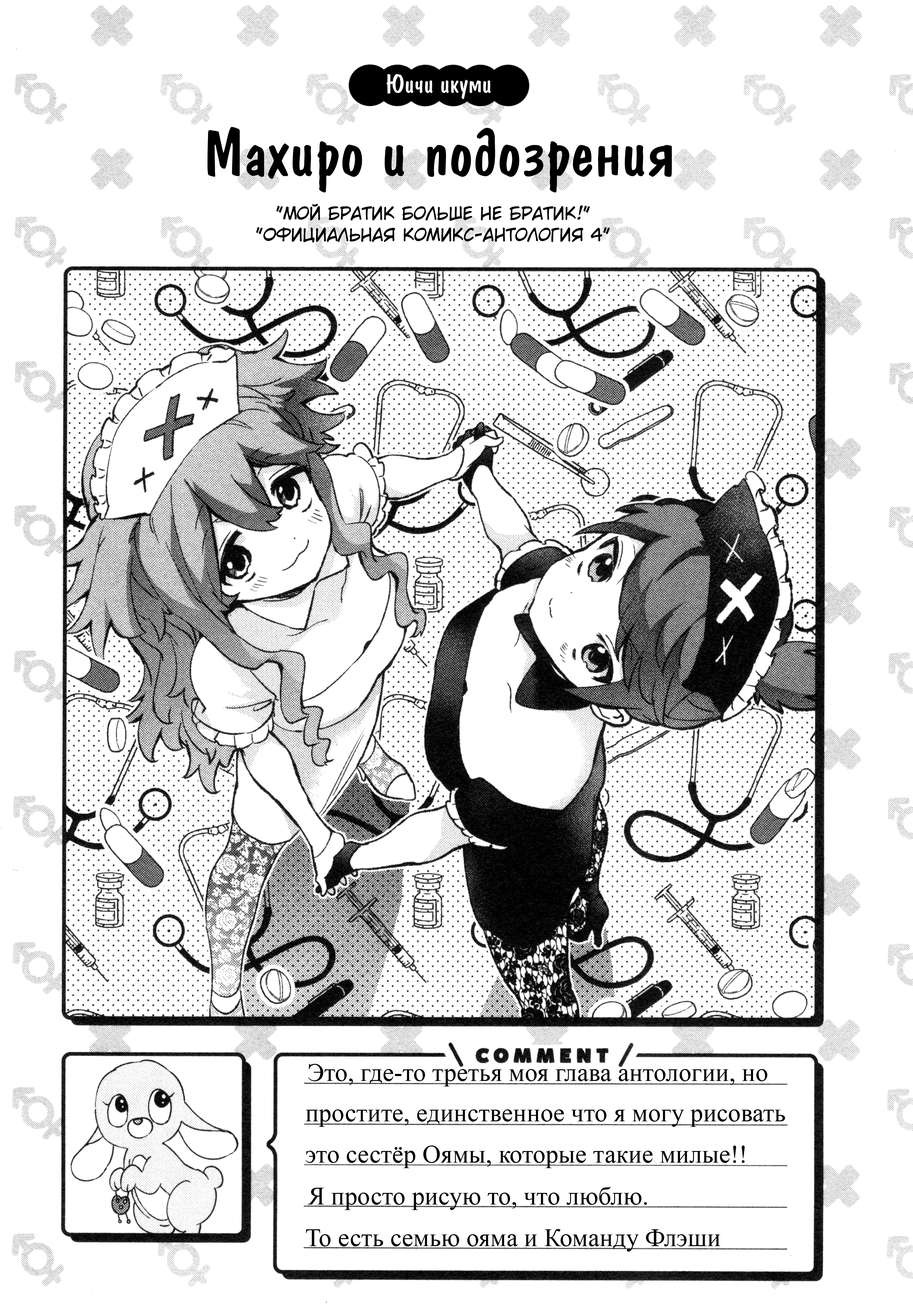
<style>
.page{position:relative;width:913px;height:1307px;background:#ffffff}
.page>*{position:absolute;margin:0}
.t1{font:25.5px "ADomIno";letter-spacing:0.006em;color:#ffffff}
.t2{font:66.2px "ADomIno";letter-spacing:0.006em;color:#000000}
.t3{font:17.1px/21.4px "v_CCWild-Words-Roman";color:#000000}
.t4{font:25.5px "TimesNewRomanPSMT";color:#000000}
</style>
<div class="page">
<p class="t1" style="left:386px;top:74px;width:105px;height:25px">Юичи икуми</p>
<p class="t2" style="left:207px;top:127px;width:465px;height:65px">Махиро и подозрения</p>
<p class="t3" style="left:256px;top:204px;width:354px;height:38px;text-align:center">"Мой братик больше не братик!"<br>"Официальная комикс-антология 4"</p>
<p class="t4" style="left:308px;top:1063px;width:459px;height:23px">Это, где-то третья моя глава антологии, но</p>
<p class="t4" style="left:305px;top:1109px;width:480px;height:17px">простите, единственное что я могу рисовать</p>
<p class="t4" style="left:305px;top:1145px;width:440px;height:23px">это сестёр Оямы, которые такие милые!!</p>
<p class="t4" style="left:307px;top:1186px;width:340px;height:24px">Я просто рисую то, что люблю.</p>
<p class="t4" style="left:306px;top:1229px;width:414px;height:22px">То есть семью ояма и Команду Флэши</p>
</div>
